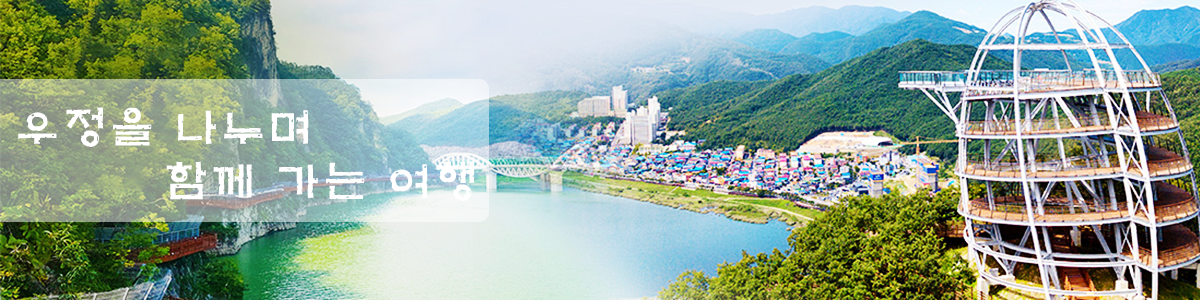
<style>
.page{position:relative;width:1200px;height:300px}
.page>*{position:absolute;margin:0}
.t1{font:44.4px "H2mkpB";letter-spacing:0.06em;color:#ffffff}
</style>
<div class="page">
<p class="t1" style="left:18px;top:107px;width:457px;height:94px;text-align:center">우정을 나누며<br>함께 가는 여행</p>
</div>
